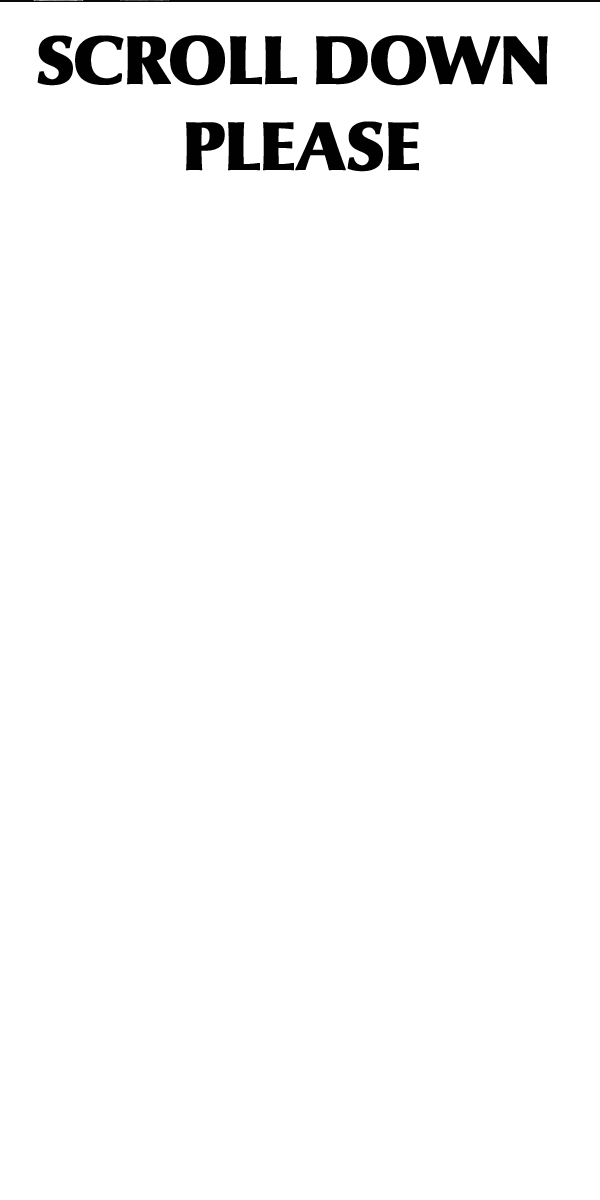
<style>
.page{position:relative;width:600px;height:1200px;background:#ffffff}
.page>*{position:absolute;margin:0}
.t1{font:68.4px "OptimaNovaLT-Black";letter-spacing:-0.02em;color:#010101;font-weight:bold;scale:1.05 1}
</style>
<div class="page">
<p class="t1" style="left:37px;top:33px;width:511px;height:137px;text-align:center">SCROLL DOWN <br>PLEASE</p>
</div>
